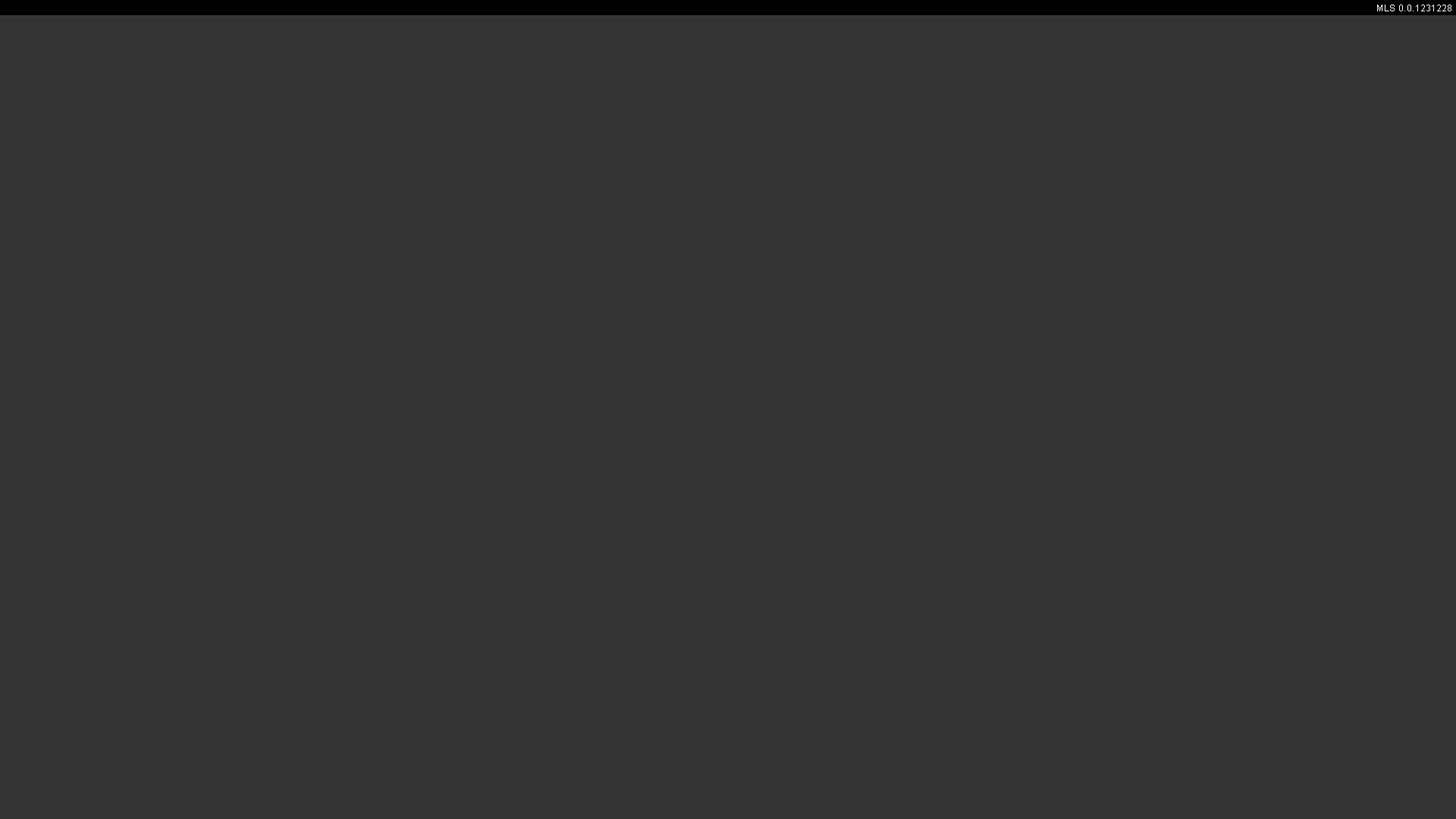
<style>
.page{position:relative;width:1456px;height:819px;background:#333333}
.page>*{position:absolute;margin:0}
.t1{font:9.1px "ArialMT";letter-spacing:0.025em;color:#ffffff}
</style>
<div class="page">
<p class="t1" style="left:1377px;top:5px;width:74px;height:6px">MLS 0.0.1231228</p>
</div>
